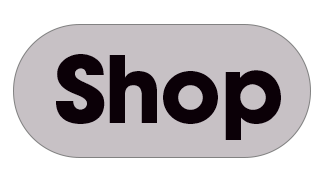
<style>
.page{position:relative;width:330px;height:182px;background:#c7c1c5}
.page>*{position:absolute;margin:0}
.t1{font:91.7px "ITCAvantGardePro-Bold";letter-spacing:-0.02em;color:#000000}
</style>
<div class="page">
<p class="t1" style="left:56px;top:54px;width:225px;height:86px">Shop</p>
</div>
